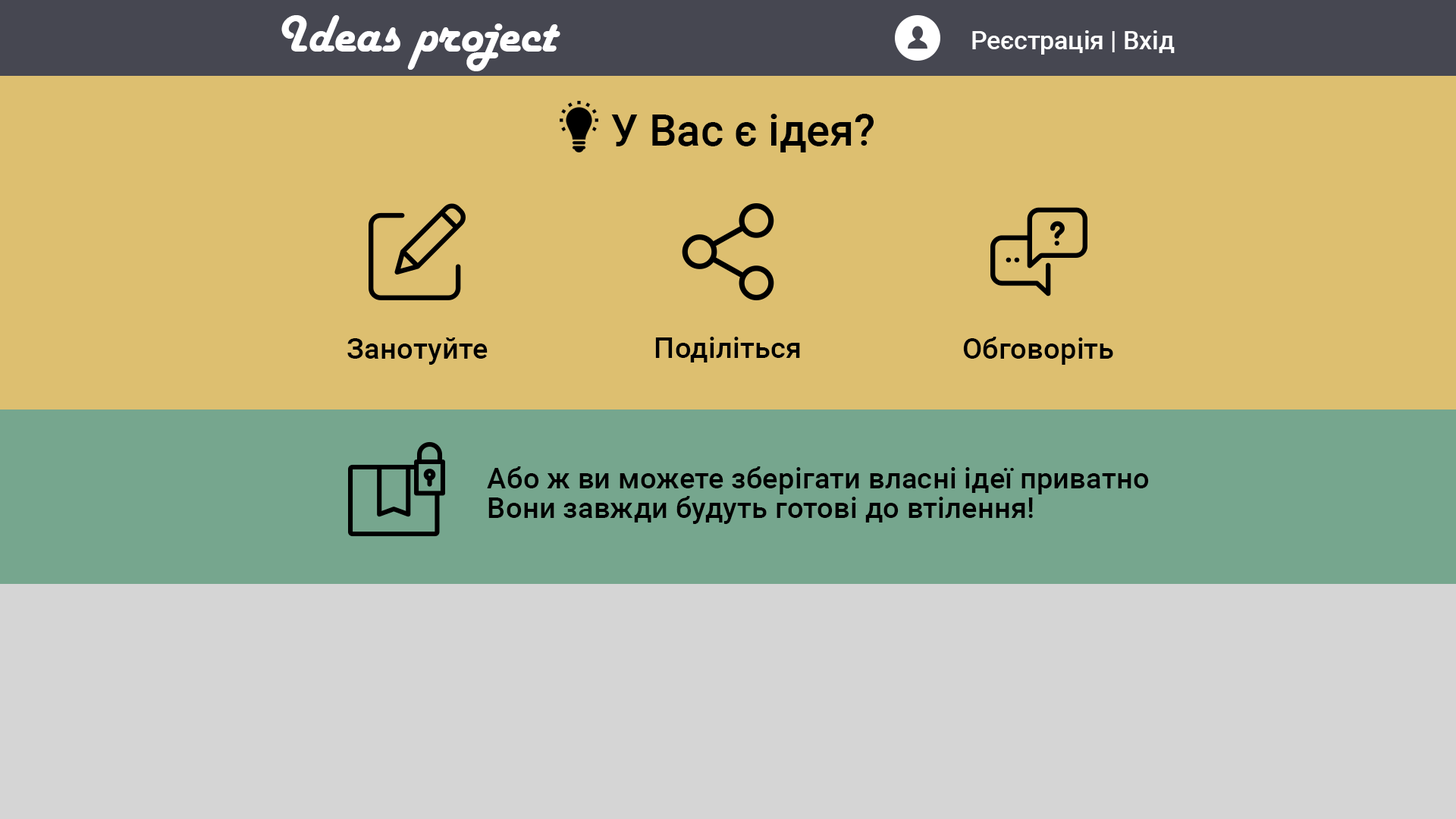
<style>
.page{position:relative;width:1456px;height:819px;background:#ddbf70}
.page>*{position:absolute;margin:0}
.t1{font:54.6px "HarlowSolid";color:#ffffff}
.t2{font:25.5px "Roboto-Medium";color:#ffffff}
.t3{font:43.7px "Roboto-Medium";color:#000000}
.t4{font:29.1px "Roboto-Medium";color:#000000}
</style>
<div class="page">
<p class="t1" style="left:281px;top:15px;width:279px;height:56px">Ideas project</p>
<p class="t2" style="left:972px;top:30px;width:203px;height:25px">Реєстрація | Вхід</p>
<p class="t3" style="left:611px;top:114px;width:263px;height:38px">У Вас є ідея?</p>
<p class="t4" style="left:347px;top:337px;width:141px;height:28px">Занотуйте</p>
<p class="t4" style="left:655px;top:337px;width:145px;height:25px">Поділіться</p>
<p class="t4" style="left:963px;top:337px;width:150px;height:28px">Обговоріть</p>
<p class="t4" style="left:487px;top:466px;width:662px;height:58px">Або ж ви можете зберігати власні ідеї приватно<br><br>Вони завжди будуть готові до втілення!</p>
</div>
